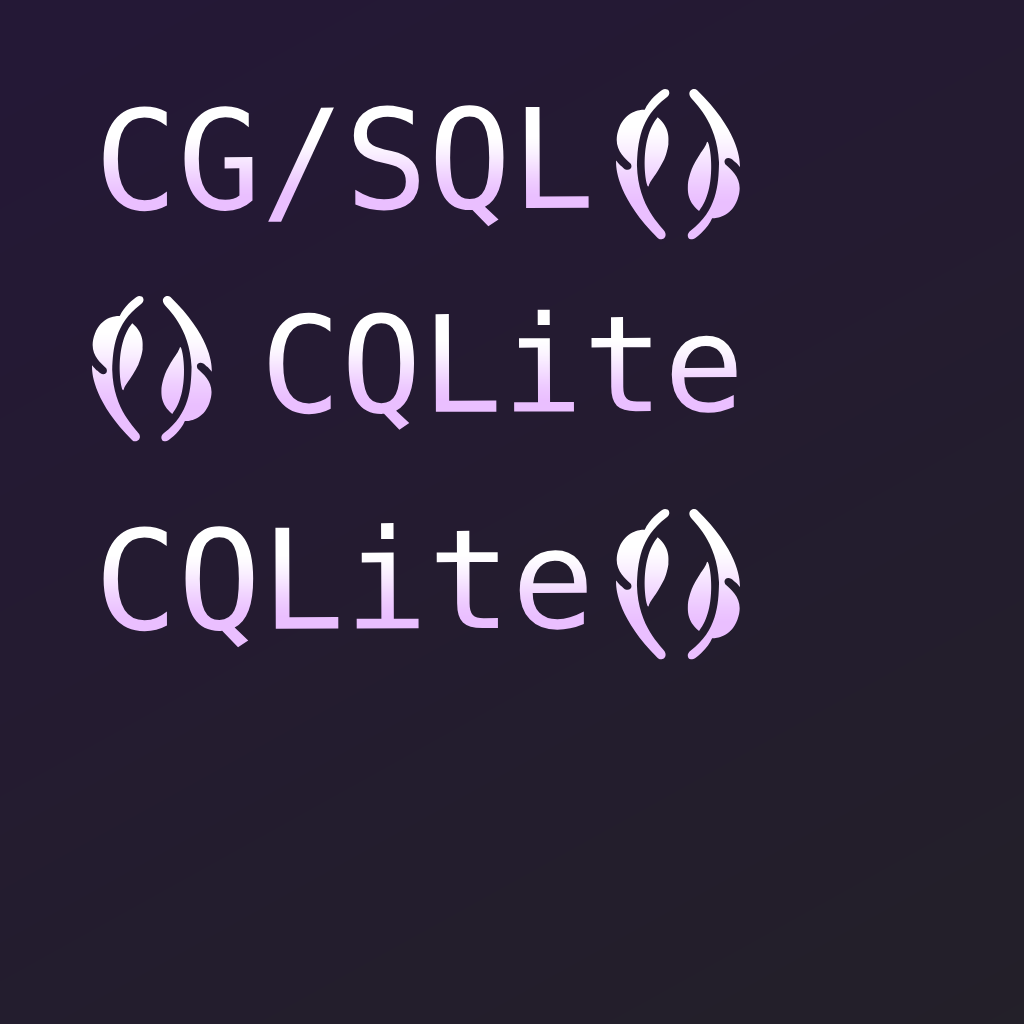
<style>
.page{position:relative;width:1024px;height:1024px}
.page>*{position:absolute;margin:0}
.t1{font:138.6px "DejaVuSansMono"}
.t2{font:134px "DejaVuSansMono"}
</style>
<div class="page">
<p class="t1" style="left:103px;top:105px;width:486px;height:122px">CG/SQL</p>
<p class="t2" style="left:269px;top:309px;width:468px;height:121px">CQLite</p>
<p class="t1" style="left:103px;top:523px;width:484px;height:125px">CQLite</p>
</div>
